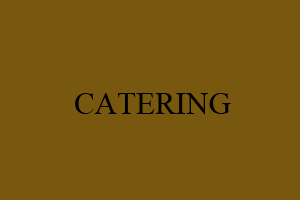
<style>
.page{position:relative;width:300px;height:200px;background:#78580f}
.page>*{position:absolute;margin:0}
.t1{font:31px "TimesNewRomanPSMT";color:#000000}
</style>
<div class="page">
<p class="t1" style="left:75px;top:93px;width:156px;height:22px">CATERING</p>
</div>
